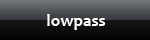
<style>
.page{position:relative;width:150px;height:40px}
.page>*{position:absolute;margin:0}
.t1{font:17px "Candara-Bold";color:#ffffff}
</style>
<div class="page">
<p class="t1" style="left:47px;top:14px;width:59px;height:16px">lowpass</p>
</div>
